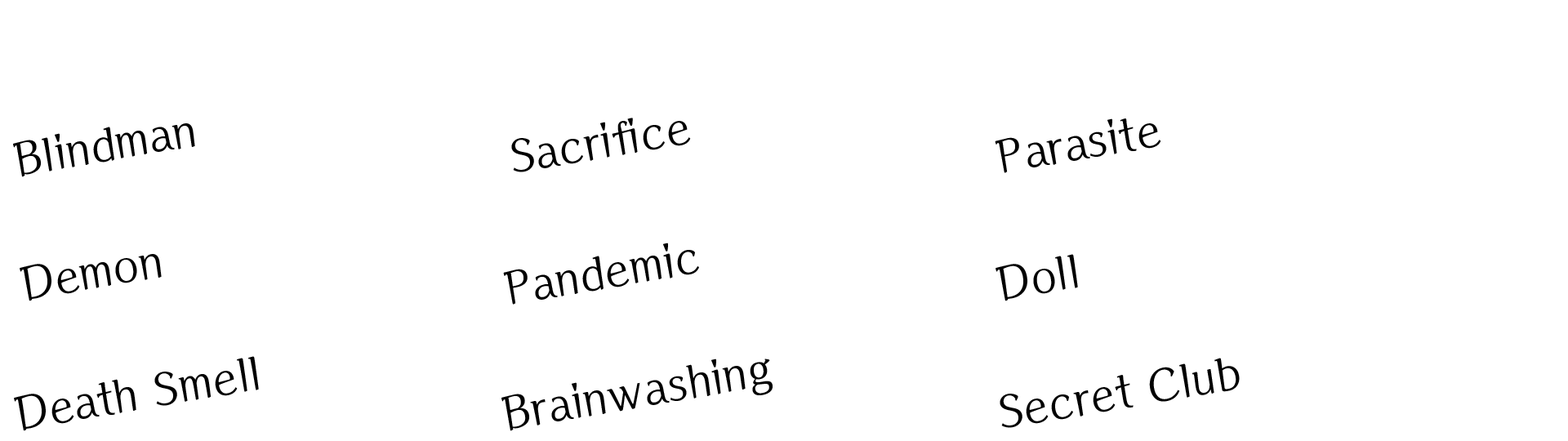
<style>
.page{position:relative;width:1568px;height:441px;background:#ffffff}
.page>*{position:absolute;margin:0}
.t1{font:45.7px "MoariaStd-Regular";color:#000000}
</style>
<div class="page">
<p class="t1" style="left:13px;top:123px;width:182px;height:54px;rotate:-10deg">Blindman</p>
<p class="t1" style="left:511px;top:118px;width:180px;height:54px;rotate:-10deg">Sacrifice</p>
<p class="t1" style="left:995px;top:118px;width:166px;height:55px;rotate:-10deg">Parasite</p>
<p class="t1" style="left:503px;top:243px;width:196px;height:62px;rotate:-10deg">Pandemic</p>
<p class="t1" style="left:20px;top:254px;width:142px;height:47px;rotate:-10deg">Demon</p>
<p class="t1" style="left:996px;top:254px;width:82px;height:47px;rotate:-10deg">Doll</p>
<p class="t1" style="left:14px;top:356px;width:245px;height:75px;rotate:-10deg">Death Smell</p>
<p class="t1" style="left:501px;top:359px;width:272px;height:72px;rotate:-10deg">Brainwashing</p>
<p class="t1" style="left:1000px;top:358px;width:240px;height:70px;rotate:-10deg">Secret Club</p>
</div>
